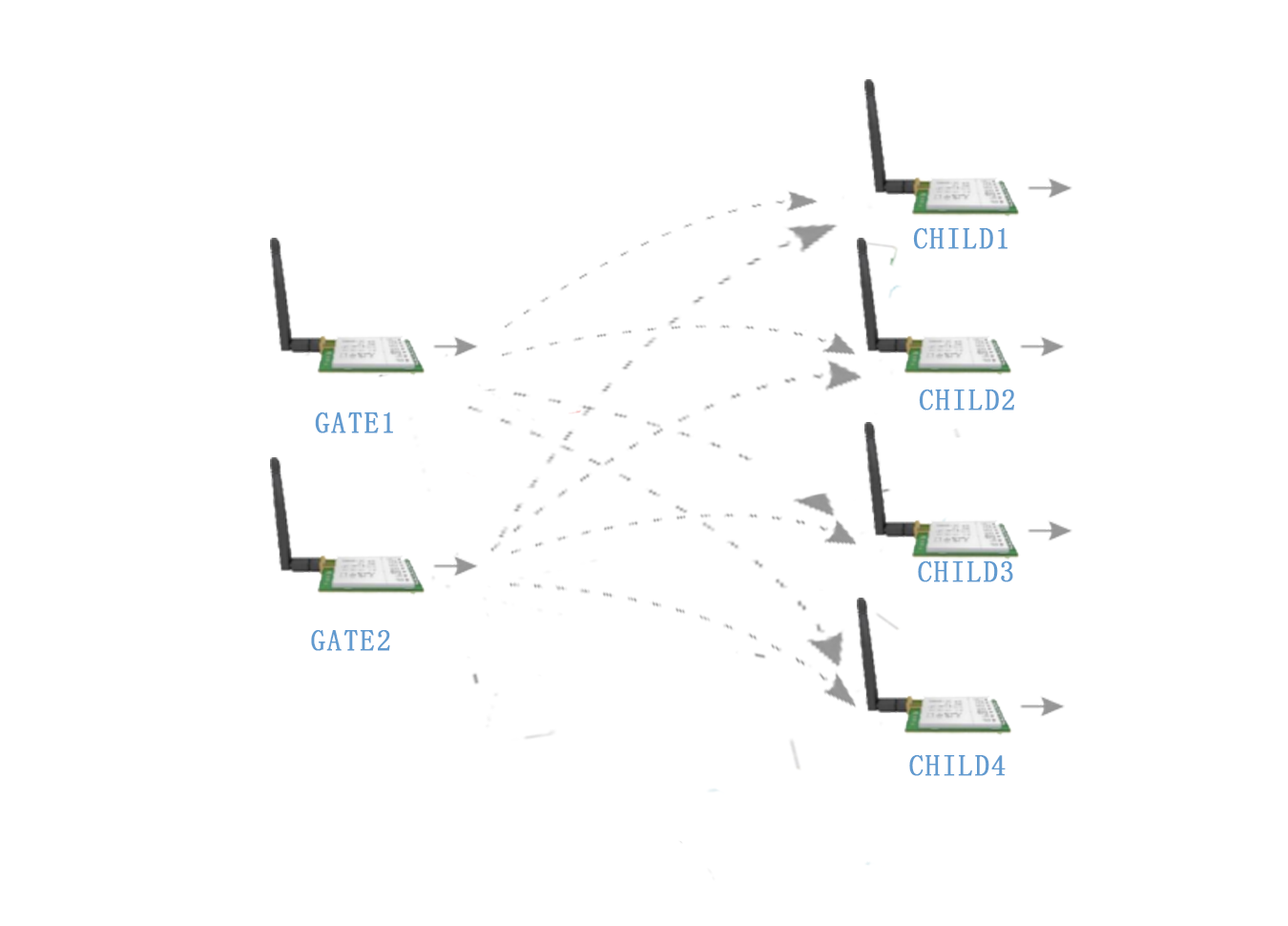
<style>
.page{position:relative;width:1288px;height:926px;background:#ffffff}
.page>*{position:absolute;margin:0}
.t1{font:28.6px "SimSun";letter-spacing:0.046em;color:#619acf;font-weight:bold}
</style>
<div class="page">
<p class="t1" style="left:913px;top:228px;width:95px;height:21px">CHILD1</p>
<p class="t1" style="left:919px;top:389px;width:95px;height:21px">CHILD2</p>
<p class="t1" style="left:315px;top:412px;width:78px;height:21px">GATE1</p>
<p class="t1" style="left:918px;top:561px;width:95px;height:21px">CHILD3</p>
<p class="t1" style="left:311px;top:630px;width:79px;height:21px">GATE2</p>
<p class="t1" style="left:909px;top:755px;width:97px;height:21px">CHILD4</p>
</div>
